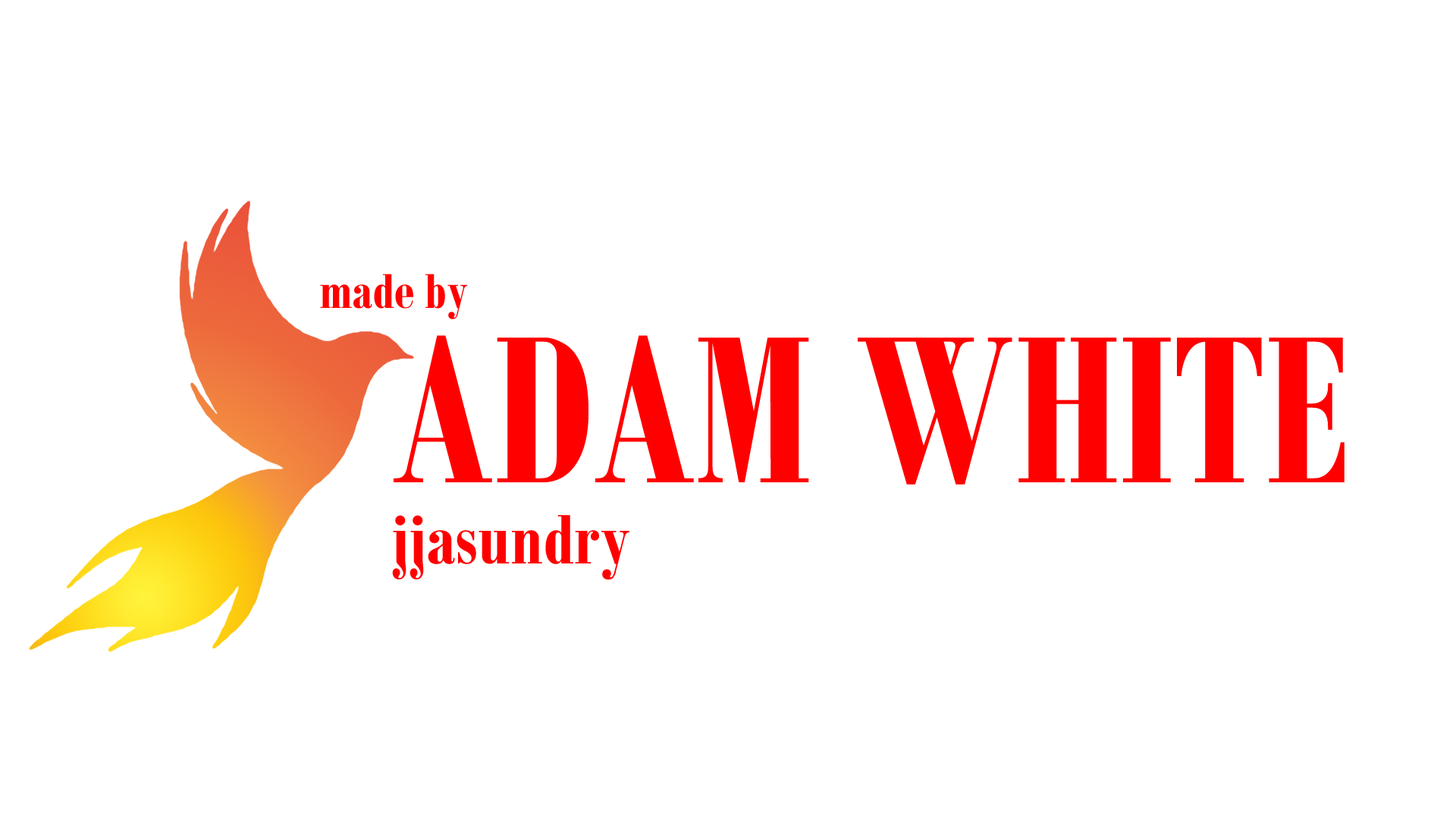
<style>
.page{position:relative;width:1456px;height:819px;background:#ffffff}
.page>*{position:absolute;margin:0}
.t1{font:53.1px "BodoniMTCondensed-Bold";color:#ff0000}
.t2{font:227.5px "BodoniMTCondensed-Bold";color:#ff0000}
.t3{font:75.8px "BodoniMTCondensed-Bold";color:#ff0000}
</style>
<div class="page">
<p class="t1" style="left:320px;top:274px;width:148px;height:45px">made by</p>
<p class="t2" style="left:394px;top:335px;width:951px;height:150px">ADAM WHITE</p>
<p class="t3" style="left:392px;top:515px;width:237px;height:65px">jjasundry</p>
</div>
